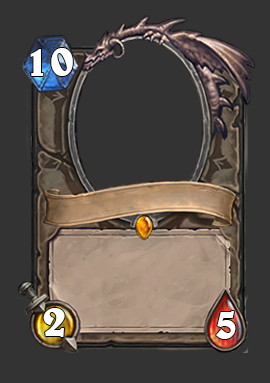
<style>
.page{position:relative;width:270px;height:383px;background:#333333}
.page>*{position:absolute;margin:0}
.t1{font:45.8px "BelweBT-Bold";color:#ffffff}
</style>
<div class="page">
<p class="t1" style="left:30px;top:48px;width:43px;height:28px">10</p>
<p class="t1" style="left:43px;top:308px;width:22px;height:29px">2</p>
<p class="t1" style="left:216px;top:311px;width:20px;height:28px">5</p>
</div>
